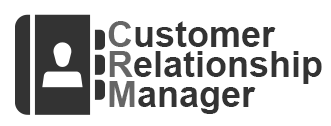
<style>
.page{position:relative;width:331px;height:126px;background:#ffffff}
.page>*{position:absolute;margin:0}
.t1{font:36px/30px "Arial-BoldMT";color:#333333}
.t2{font:36px/30px "Arial-BoldMT";color:#666666}
</style>
<div class="page">
<p class="t1" style="left:108px;top:21px;width:214px;height:93px"><span class="t2">C</span>ustomer<br><span class="t2">R</span>elationship<br><span class="t2">M</span>anager</p>
</div>
